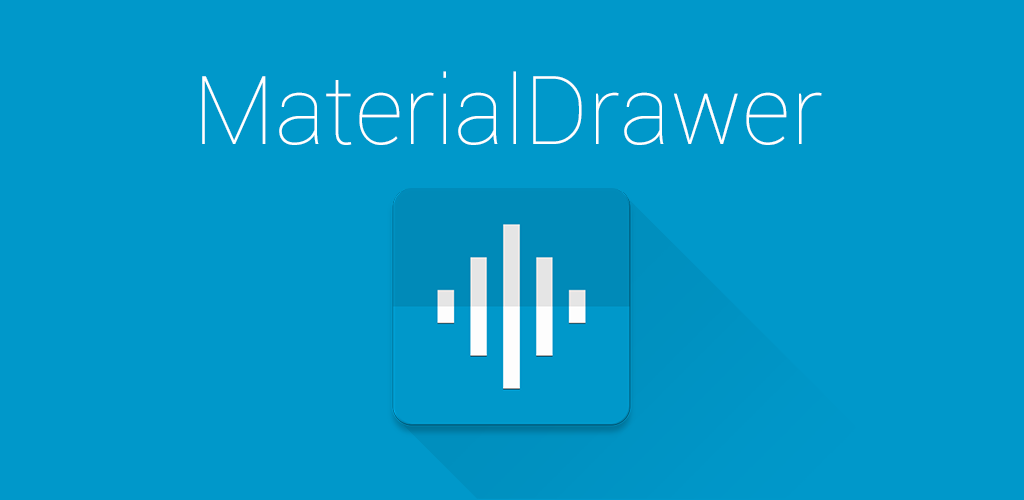
<style>
.page{position:relative;width:1024px;height:500px;background:#0098ca}
.page>*{position:absolute;margin:0}
.t1{font:95.2px "Roboto-Thin";color:#ffffff}
</style>
<div class="page">
<p class="t1" style="left:202px;top:71px;width:620px;height:74px">MaterialDrawer</p>
</div>
